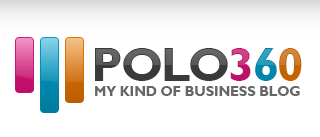
<style>
.page{position:relative;width:320px;height:137px;background:#ffffff}
.page>*{position:absolute;margin:0}
.t1{font:48px "GillSansMT-Bold";letter-spacing:-0.04em}
.t2{font:13.7px "GillSansMT-Bold";color:#666666}
</style>
<div class="page">
<p class="t1" style="left:95px;top:48px;width:207px;height:33px">POLO360</p>
<p class="t2" style="left:95px;top:86px;width:205px;height:10px">MY KIND OF BUSINESS BLOG</p>
</div>
